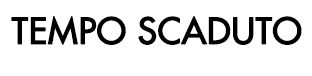
<style>
.page{position:relative;width:312px;height:76px;background:#ffffff}
.page>*{position:absolute;margin:0}
.t1{font:35px "FuturaStd-Medium";color:#000000;font-weight:bold}
</style>
<div class="page">
<p class="t1" style="left:11px;top:16px;width:291px;height:29px">TEMPO SCADUTO</p>
</div>
